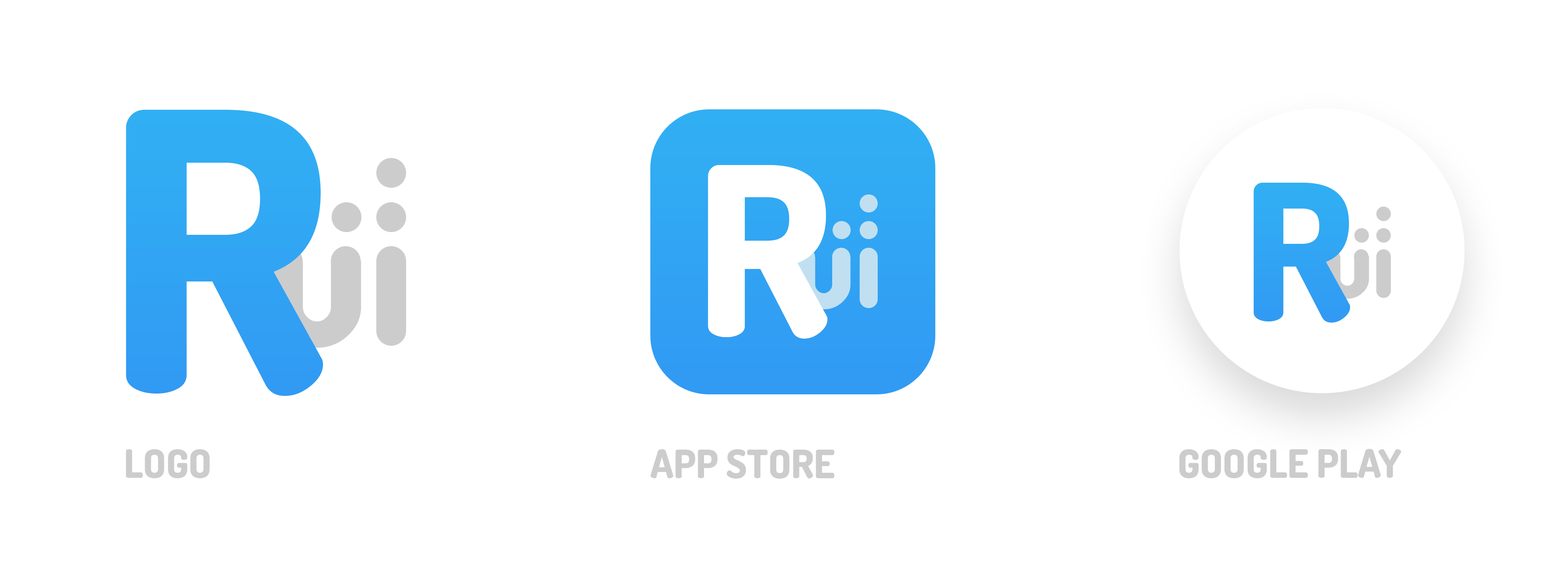
<style>
.page{position:relative;width:1568px;height:588px;background:#ffffff}
.page>*{position:absolute;margin:0}
.t1{font:388.5px "Dosis-ExtraBold";color:#31a6f3}
.t2{font:235.2px "Dosis-ExtraBold";color:#ffffff}
.t3{font:194.2px "Dosis-ExtraBold";color:#cccccc}
.t4{font:39.2px "Dosis-ExtraBold";color:#cccccc}
</style>
<div class="page">
<p class="t1" style="left:126px;top:110px;width:197px;height:286px">R</p>
<p class="t2" style="left:708px;top:165px;width:120px;height:174px">R</p>
<p class="t3" style="left:272px;top:253px;width:89px;height:95px">u</p>
<p class="t4" style="left:126px;top:449px;width:84px;height:29px">LOGO</p>
<p class="t4" style="left:650px;top:449px;width:185px;height:30px">APP STORE</p>
<p class="t4" style="left:1179px;top:449px;width:222px;height:29px">GOOGLE PLAY</p>
</div>
